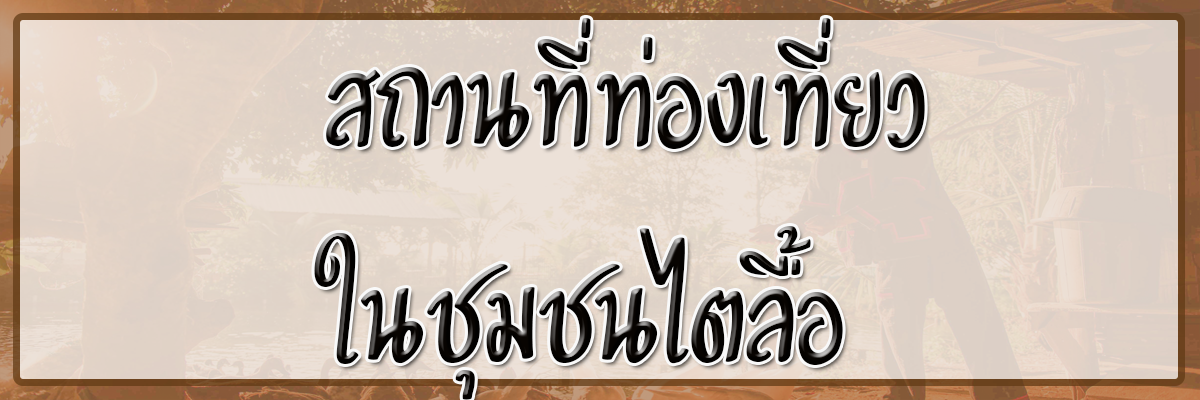
<style>
.page{position:relative;width:1200px;height:400px}
.page>*{position:absolute;margin:0}
.t1{font:180px "UID-SALMON-2019-";color:#080401}
</style>
<div class="page">
<p class="t1" style="left:314px;top:17px;width:611px;height:383px;text-align:right">สถานที่ท่องเที่ยว<br>    ในชุมชนไตลื้อ</p>
</div>
